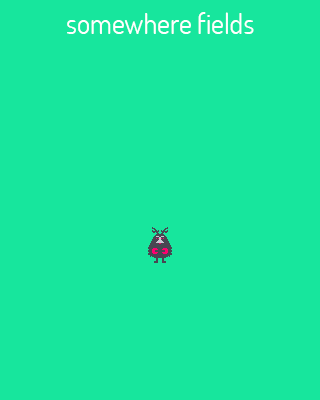
<style>
.page{position:relative;width:320px;height:400px;background:#17e69d}
.page>*{position:absolute;margin:0}
.t1{font:28px "Dosis-Regular";color:#ffffff}
</style>
<div class="page">
<p class="t1" style="left:67px;top:12px;width:187px;height:22px">somewhere fields</p>
</div>
